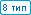
<style>
.page{position:relative;width:31px;height:15px;background:#ffffff}
.page>*{position:absolute;margin:0}
.t1{font:10px "ArialMT";letter-spacing:0.04em;color:#006699;scale:0.92 1}
</style>
<div class="page">
<p class="t1" style="left:3px;top:4px;width:23px;height:7px">8 тип</p>
</div>
